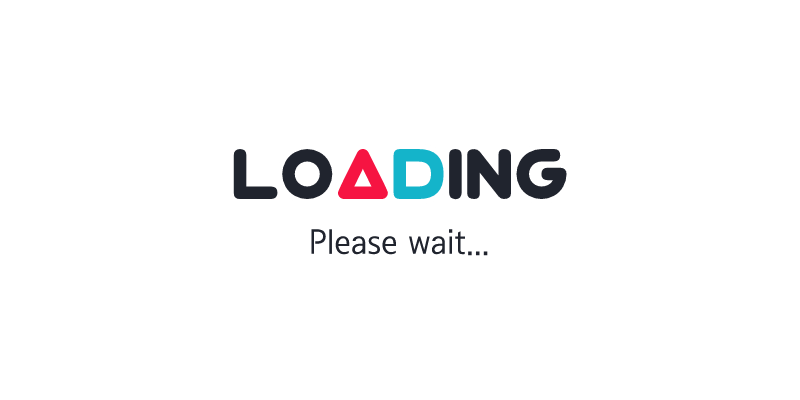
<style>
.page{position:relative;width:800px;height:400px;background:#ffffff}
.page>*{position:absolute;margin:0}
.t1{font:80px "Virgo01";color:#20242e}
.t2{font:80px "Virgo01";color:#f61442}
.t3{font:80px "Virgo01";color:#14b4ca}
.t4{font:35px "SeN-CM";color:#20242e}
</style>
<div class="page">
<p class="t1" style="left:233px;top:148px;width:334px;height:52px">Lo<span class="t2">a</span><span class="t3">d</span>ing</p>
<p class="t4" style="left:311px;top:229px;width:177px;height:27px">Please wait...</p>
</div>
